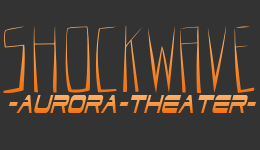
<style>
.page{position:relative;width:260px;height:150px;background:#333333}
.page>*{position:absolute;margin:0}
.t1{font:95.6px "ANODIN";color:#f48124;scale:1.3 1}
.t2{font:31.6px "DodgerCondensedItalic";scale:0.63 1}
</style>
<div class="page">
<p class="t1" style="left:3px;top:25px;width:252px;height:69px">SHOCKWAVE</p>
<p class="t2" style="left:8px;top:95px;width:248px;height:18px">-AURORA-THEATER-</p>
</div>
